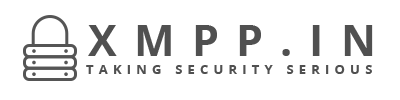
<style>
.page{position:relative;width:400px;height:100px;background:#ffffff}
.page>*{position:absolute;margin:0}
.t1{font:43px "OpenSans-Bold";letter-spacing:0.4em;color:#505050;text-transform:uppercase}
.t2{font:13px "OpenSans-Bold";letter-spacing:0.4em;color:#505050;text-transform:uppercase}
</style>
<div class="page">
<p class="t1" style="left:88px;top:25px;width:285px;height:31px">xmpp.in</p>
<p class="t2" style="left:86px;top:65px;width:286px;height:9px">taking security serious</p>
</div>
